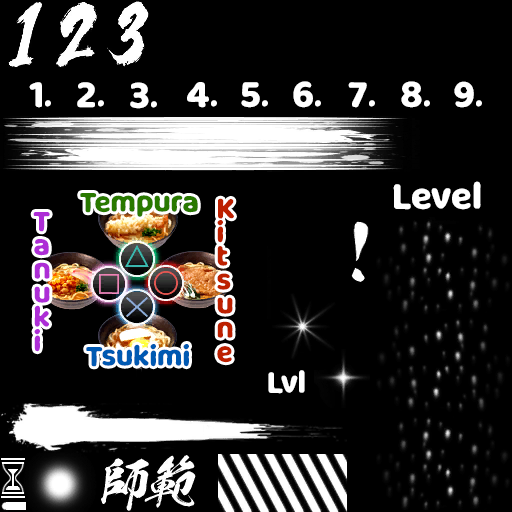
<style>
.page{position:relative;width:512px;height:512px;background:#000000}
.page>*{position:absolute;margin:0}
.t1{font:36px "MilkyNiceClean";color:#ffffff}
.t2{font:28px "MilkyNiceClean";color:#297900}
.t3{font:28px/24px "MilkyNiceClean";color:#bd2000}
.t4{font:28px/24px "MilkyNiceClean";color:#ad2dd6}
.t5{font:28px "MilkyNiceClean";color:#0059b2}
.t6{font:30px "MilkyNiceClean";color:#ffffff}
</style>
<div class="page">
<p class="t1" style="left:29px;top:82px;width:22px;height:26px">1.</p>
<p class="t1" style="left:77px;top:82px;width:27px;height:26px">2.</p>
<p class="t1" style="left:130px;top:82px;width:27px;height:27px">3.</p>
<p class="t1" style="left:187px;top:82px;width:30px;height:26px">4.</p>
<p class="t1" style="left:241px;top:82px;width:27px;height:26px">5.</p>
<p class="t1" style="left:293px;top:81px;width:28px;height:27px">6.</p>
<p class="t1" style="left:348px;top:82px;width:27px;height:26px">7.</p>
<p class="t1" style="left:401px;top:81px;width:29px;height:27px">8.</p>
<p class="t1" style="left:454px;top:81px;width:28px;height:27px">9.</p>
<p class="t1" style="left:393px;top:181px;width:88px;height:29px">Level</p>
<p class="t2" style="left:80px;top:193px;width:118px;height:24px">Tempura</p>
<p class="t3" style="left:217px;top:198px;width:17px;height:165px">K<br>i<br>t<br>s<br>u<br>n<br>e</p>
<p class="t4" style="left:33px;top:212px;width:17px;height:140px">T<br>a<br>n<br>u<br>k<br>i</p>
<p class="t5" style="left:86px;top:344px;width:103px;height:23px">Tsukimi</p>
<p class="t6" style="left:268px;top:370px;width:37px;height:24px">Lvl</p>
</div>
